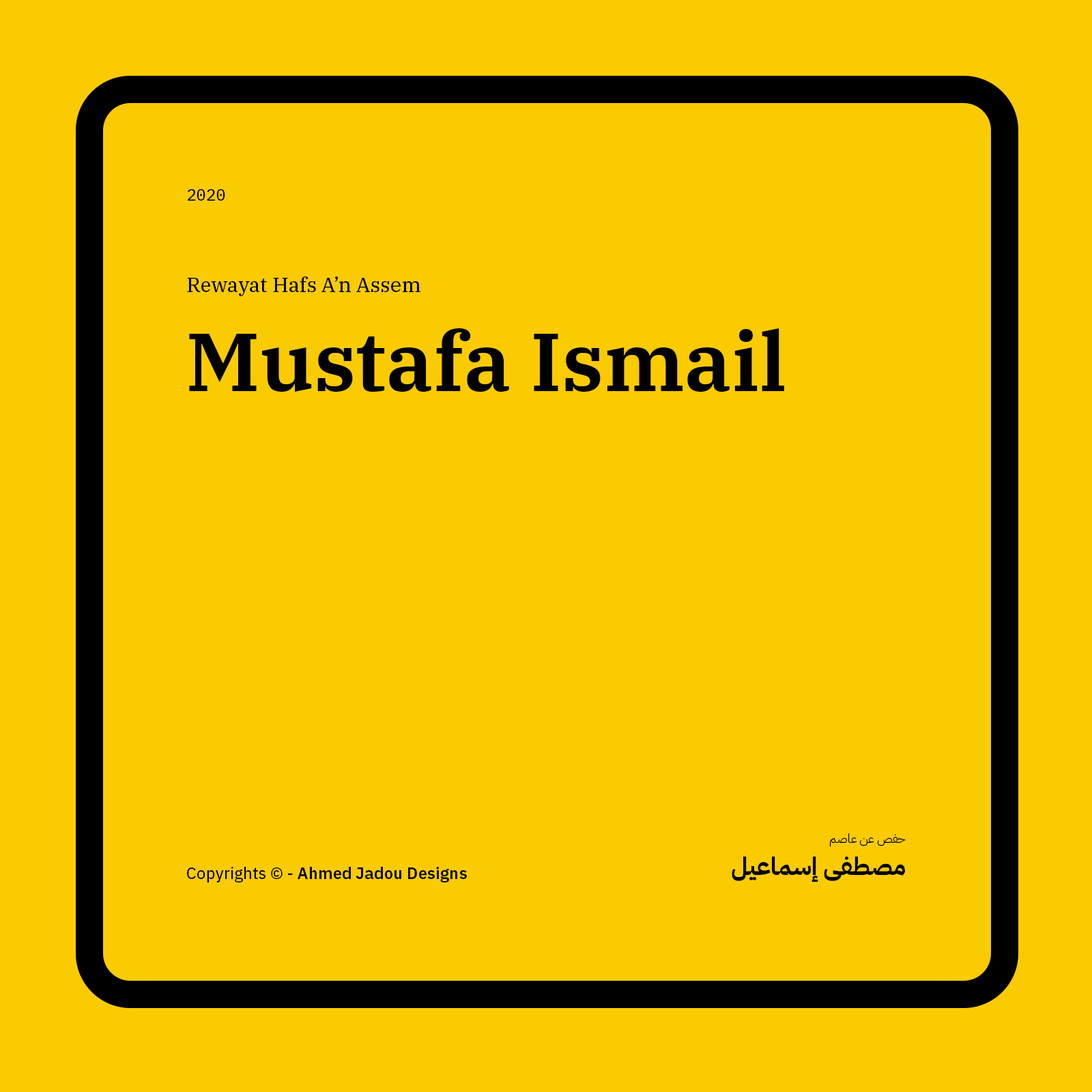
<style>
.page{position:relative;width:1092px;height:1092px;background:#facb00}
.page>*{position:absolute;margin:0}
.t1{font:16.4px "IBMPlexMono-Text";color:#000000}
.t2{font:20.5px "IBMPlexSerif-Text";color:#000000}
.t3{font:81.9px "IBMPlexSerif-SemiBold";color:#000000}
.t4{font:12.3px "IBMPlexArabic-Light";color:#000000}
.t5{font:24.6px "IBMPlexArabic-Bold";color:#000000}
.t6{font:16.4px "IBMPlexSans-SemiBold";color:#000000}
.t7{font:16.4px "IBMPlexSans-Text";color:#000000}
</style>
<div class="page">
<p class="t1" style="left:188px;top:189px;width:37px;height:12px">2020</p>
<p class="t2" style="left:187px;top:276px;width:233px;height:20px">Rewayat Hafs A’n Assem</p>
<p class="t3" style="left:189px;top:328px;width:595px;height:64px">Mustafa Ismail</p>
<p class="t4" style="left:830px;top:833px;width:76px;height:14px">حفص عن عاصم</p>
<p class="t5" style="left:732px;top:857px;width:173px;height:25px">مصطفى إسماعيل</p>
<p class="t6" style="left:187px;top:867px;width:280px;height:15px"><span class="t7">Copyrights © - </span>Ahmed Jadou Designs</p>
</div>
